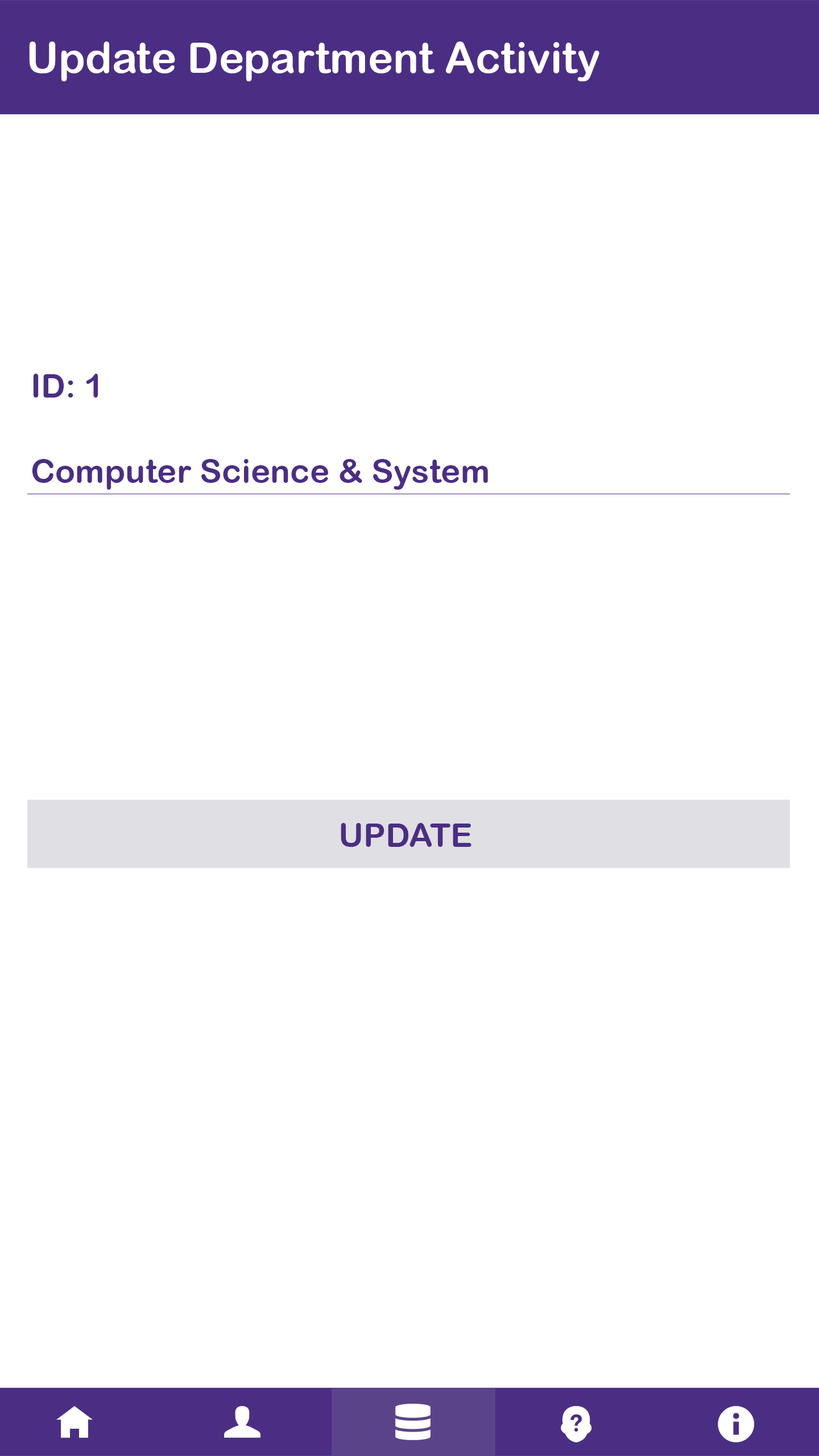
<style>
.page{position:relative;width:819px;height:1456px;background:#ffffff}
.page>*{position:absolute;margin:0}
.t1{font:42.7px "ArialRoundedMTBold";color:#ffffff}
.t2{font:33.2px "ArialRoundedMTBold";color:#4b2e83}
</style>
<div class="page">
<p class="t1" style="left:29px;top:42px;width:570px;height:39px">Update Department Activity</p>
<p class="t2" style="left:33px;top:374px;width:65px;height:24px">ID: 1</p>
<p class="t2" style="left:32px;top:459px;width:456px;height:31px">Computer Science &amp; System</p>
<p class="t2" style="left:341px;top:823px;width:130px;height:24px">UPDATE</p>
</div>
